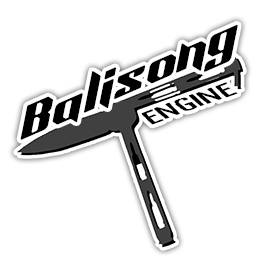
<style>
.page{position:relative;width:256px;height:256px;background:#ffffff}
.page>*{position:absolute;margin:0}
.t1{font:36.5px "AerobladeDEMO";color:#000000}
.t2{font:24px "BladesmithDEMO-Regular";color:#000000;scale:1.8 1}
</style>
<div class="page">
<p class="t1" style="left:20px;top:24px;width:218px;height:116px;rotate:-24deg">Balisong</p>
<p class="t2" style="left:141px;top:82px;width:97px;height:43px;rotate:-20deg">ENGINE</p>
</div>
